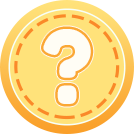
<style>
.page{position:relative;width:134px;height:134px;background:#ffe27a}
.page>*{position:absolute;margin:0}
.t1{font:100px "FredokaOne-Regular";color:#fffdf5}
</style>
<div class="page">
<p class="t1" style="left:43px;top:29px;width:48px;height:75px">?</p>
</div>
